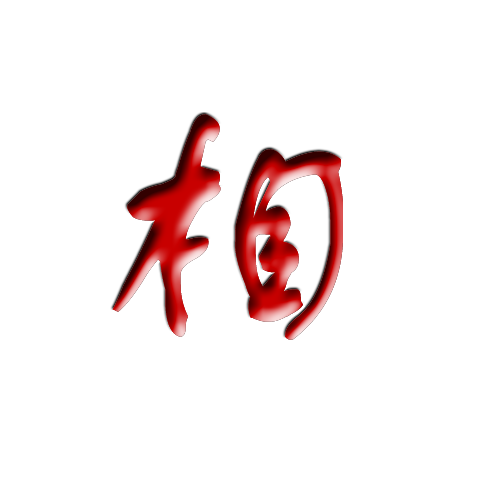
<style>
.page{position:relative;width:500px;height:500px;background:#ffffff}
.page>*{position:absolute;margin:0}
.t1{font:320px "FZSTK--GBK1-0"}
</style>
<div class="page">
<p class="t1" style="left:112px;top:114px;width:231px;height:226px">相</p>
</div>
